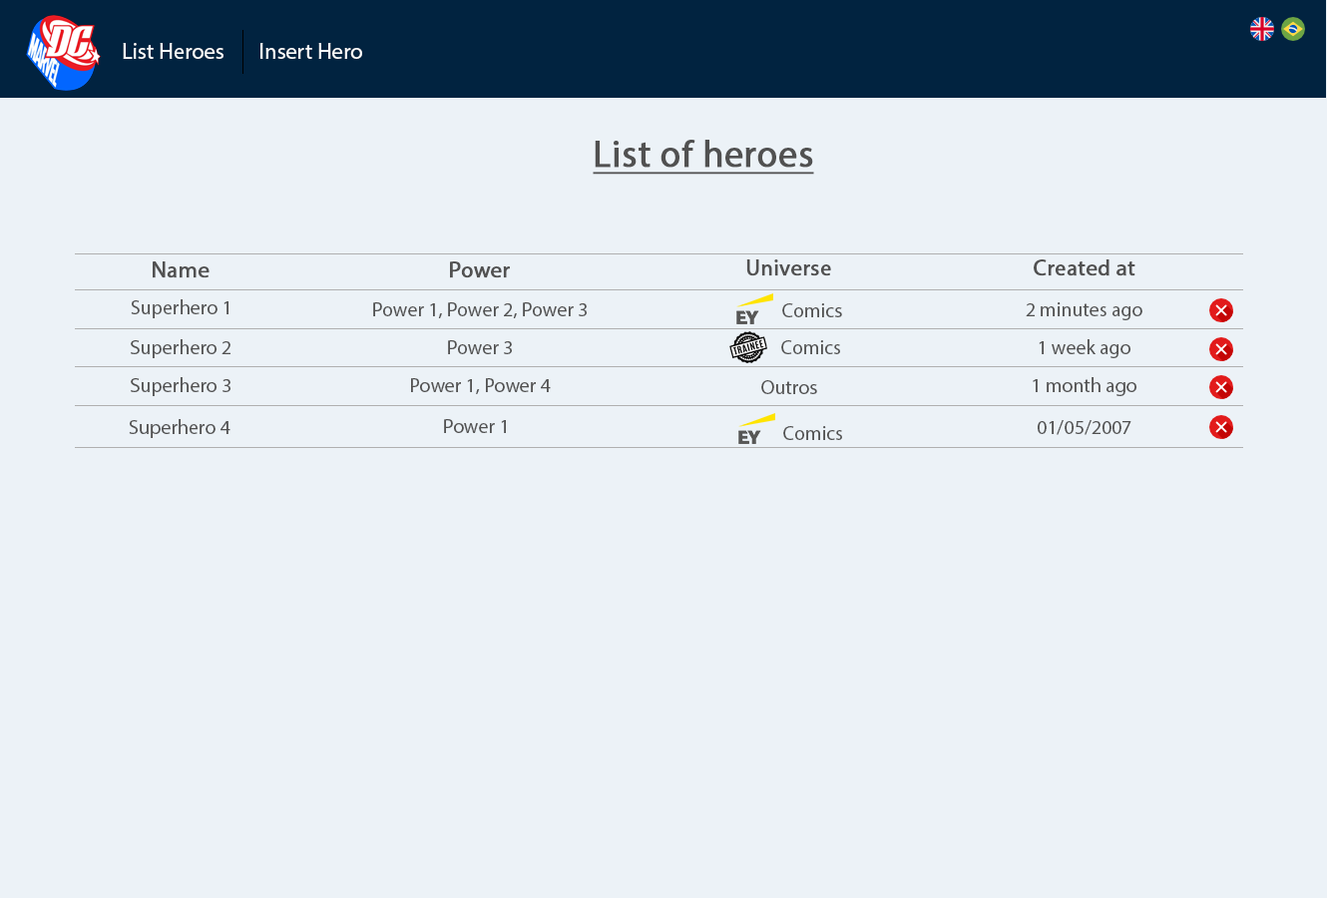
<style>
.page{position:relative;width:1327px;height:898px;background:#ecf2f7}
.page>*{position:absolute;margin:0}
.t1{font:22.5px "MyriadPro-Regular";color:#ffffff}
.t2{font:37.4px "MyriadPro-Regular";color:#515151;font-weight:bold;text-decoration:underline}
.t3{font:22.5px "MyriadPro-Regular";color:#515151;font-weight:bold}
.t4{font:22.4px "MyriadPro-Regular";color:#515151;font-weight:bold}
.t5{font:20px "MyriadPro-Regular";color:#515151}
.t6{font:19.9px "MyriadPro-Regular";color:#515151}
</style>
<div class="page">
<p class="t1" style="left:123px;top:43px;width:101px;height:16px">List Heroes</p>
<p class="t1" style="left:261px;top:43px;width:101px;height:16px">Insert Hero</p>
<p class="t2" style="left:593px;top:140px;width:221px;height:35px">List of heroes</p>
<p class="t3" style="left:153px;top:261px;width:57px;height:17px">Name</p>
<p class="t4" style="left:450px;top:261px;width:60px;height:17px">Power</p>
<p class="t3" style="left:747px;top:260px;width:84px;height:16px">Universe</p>
<p class="t3" style="left:1034px;top:260px;width:102px;height:16px">Created at</p>
<p class="t5" style="left:131px;top:299px;width:98px;height:19px">Superhero 1</p>
<p class="t6" style="left:373px;top:302px;width:214px;height:16px">Power 1, Power 2, Power 3</p>
<p class="t6" style="left:783px;top:303px;width:59px;height:14px">Comics</p>
<p class="t6" style="left:1026px;top:302px;width:117px;height:18px">2 minutes ago</p>
<p class="t5" style="left:131px;top:339px;width:100px;height:19px">Superhero 2</p>
<p class="t6" style="left:448px;top:340px;width:64px;height:14px">Power 3</p>
<p class="t6" style="left:782px;top:340px;width:58px;height:14px">Comics</p>
<p class="t6" style="left:1039px;top:339px;width:92px;height:19px">1 week ago</p>
<p class="t5" style="left:131px;top:377px;width:100px;height:19px">Superhero 3</p>
<p class="t6" style="left:1033px;top:377px;width:104px;height:19px">1 month ago</p>
<p class="t6" style="left:411px;top:378px;width:140px;height:16px">Power 1, Power 4</p>
<p class="t5" style="left:762px;top:380px;width:55px;height:14px">Outros</p>
<p class="t5" style="left:129px;top:419px;width:102px;height:19px">Superhero 4</p>
<p class="t6" style="left:444px;top:419px;width:62px;height:14px">Power 1</p>
<p class="t6" style="left:1038px;top:420px;width:94px;height:15px">01/05/2007</p>
<p class="t6" style="left:784px;top:426px;width:58px;height:14px">Comics</p>
</div>
